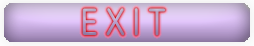
<style>
.page{position:relative;width:254px;height:46px}
.page>*{position:absolute;margin:0}
.t1{font:37.5px "BloggerSans";letter-spacing:0.2em}
</style>
<div class="page">
<p class="t1" style="left:82px;top:8px;width:84px;height:28px">EXIT</p>
</div>
